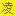
<style>
.page{position:relative;width:16px;height:16px;background:#ffec1b}
.page>*{position:absolute;margin:0}
.t1{font:12px "SimSun";letter-spacing:0.08em;color:#727608}
</style>
<div class="page">
<p class="t1" style="left:2px;top:2px;width:11px;height:12px">凌</p>
</div>
